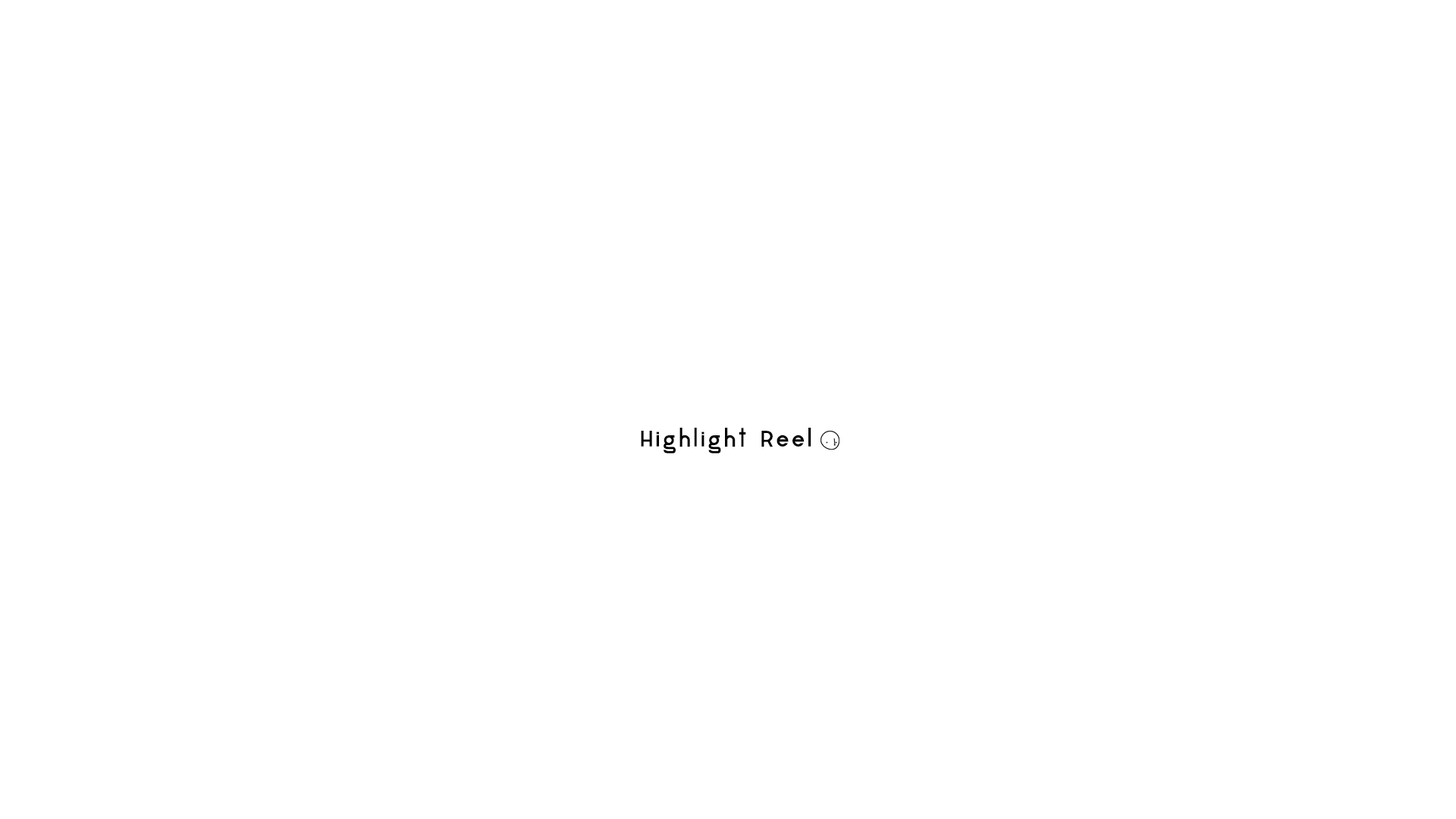
<style>
.page{position:relative;width:1456px;height:819px;background:#ffffff}
.page>*{position:absolute;margin:0}
.t1{font:21.2px "AquaGrotesque";letter-spacing:0.05em;color:#000000}
</style>
<div class="page">
<p class="t1" style="left:641px;top:428px;width:170px;height:25px">Highlight Reel</p>
</div>
